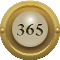
<style>
.page{position:relative;width:60px;height:60px}
.page>*{position:absolute;margin:0}
.t1{font:18px "ArnoPro-Bold"}
</style>
<div class="page">
<p class="t1" style="left:16px;top:23px;width:27px;height:13px">365</p>
</div>
